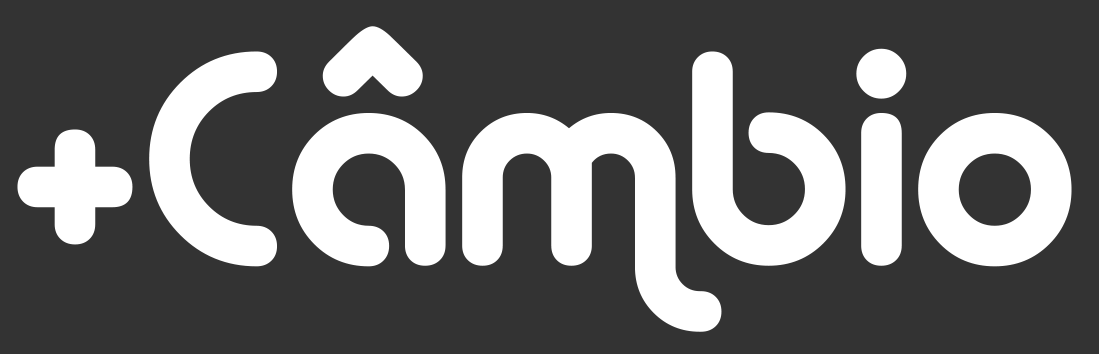
<style>
.page{position:relative;width:1099px;height:354px;background:#333333}
.page>*{position:absolute;margin:0}
.t1{font:300px "Alba";color:#ffffff}
</style>
<div class="page">
<p class="t1" style="left:17px;top:26px;width:1055px;height:306px">+Câmbio</p>
</div>
